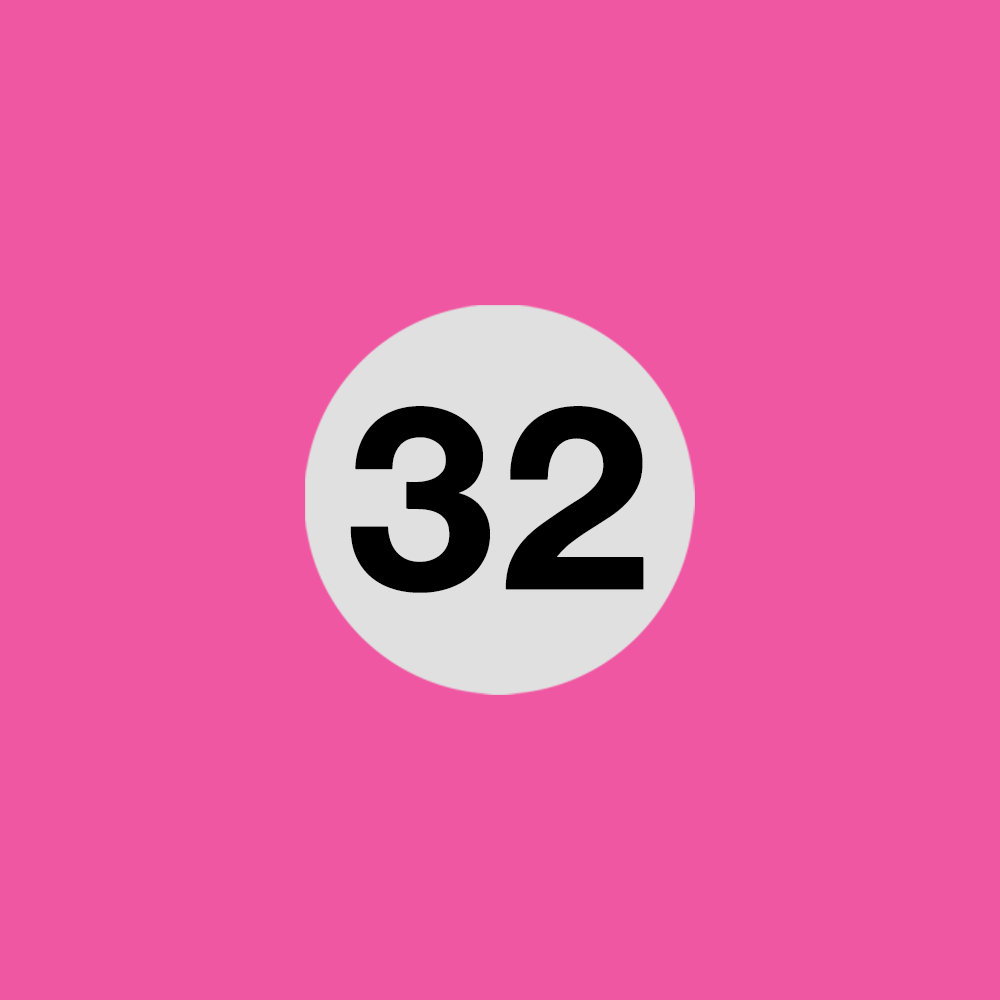
<style>
.page{position:relative;width:1000px;height:1000px;background:#ef57a2}
.page>*{position:absolute;margin:0}
.t1{font:255px "HelveticaNeue-Bold";color:#000000;font-weight:bold;scale:1.04 1}
</style>
<div class="page">
<p class="t1" style="left:350px;top:406px;width:294px;height:187px">32</p>
</div>
